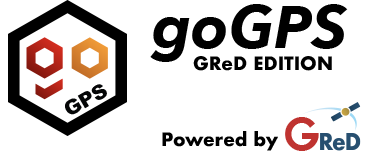
<style>
.page{position:relative;width:368px;height:156px;background:#ffffff}
.page>*{position:absolute;margin:0}
.t1{font:60px "AvenirNext-BoldItalic";color:#000000}
.t2{font:18px "Futura-Bold";color:#000000}
</style>
<div class="page">
<p class="t1" style="left:150px;top:4px;width:198px;height:58px">goGPS</p>
<p class="t2" style="left:193px;top:56px;width:139px;height:15px">GReD EDITION</p>
<p class="t2" style="left:162px;top:131px;width:116px;height:20px">Powered by</p>
</div>
